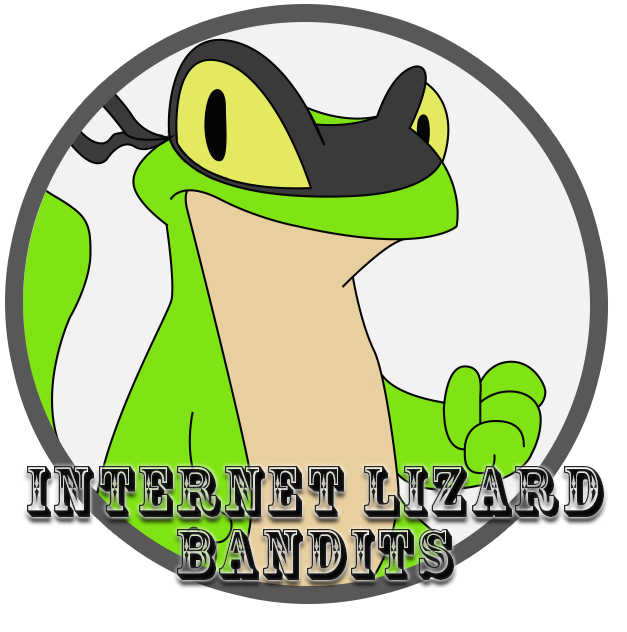
<style>
.page{position:relative;width:627px;height:632px;background:#ffffff}
.page>*{position:absolute;margin:0}
.t1{font:66.7px/62.5px "RosewoodStd-Regular";letter-spacing:0.06em;color:#000000}
</style>
<div class="page">
<p class="t1" style="left:27px;top:466px;width:577px;height:114px;text-align:center">Internet Lizard <br>Bandits</p>
</div>
